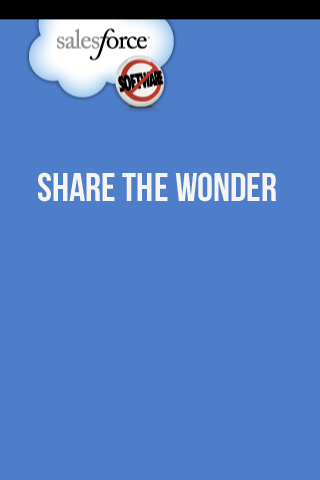
<style>
.page{position:relative;width:320px;height:480px;background:#4e7eca}
.page>*{position:absolute;margin:0}
.t1{font:40px "BebasNeue";color:#f5f4f0}
</style>
<div class="page">
<p class="t1" style="left:38px;top:172px;width:239px;height:30px">Share The Wonder</p>
</div>
